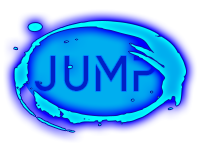
<style>
.page{position:relative;width:200px;height:150px;background:#ffffff}
.page>*{position:absolute;margin:0}
.t1{font:48px "ZELDA";color:#0021c6}
</style>
<div class="page">
<p class="t1" style="left:35px;top:56px;width:121px;height:35px">Jump</p>
</div>
